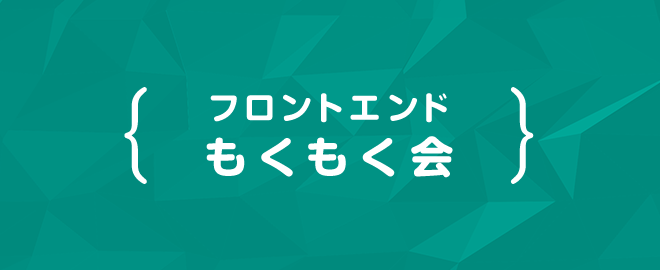
<style>
.page{position:relative;width:660px;height:270px}
.page>*{position:absolute;margin:0}
.t1{font:99.9px "GShinMGoPro-Light";letter-spacing:0.22em;color:#ffffff}
.t2{font:32.2px/53.6px "GShinMGoPro-Bold";letter-spacing:0.18em;color:#ffffff}
.t3{font:43px/53.6px "GShinMGoPro-Bold";letter-spacing:0.22em;color:#ffffff}
</style>
<div class="page">
<p class="t1" style="left:124px;top:87px;width:410px;height:97px">{      }</p>
<p class="t2" style="left:206px;top:93px;width:247px;height:85px;text-align:center">フロントエンド<br><span class="t3">もくもく会</span></p>
</div>
